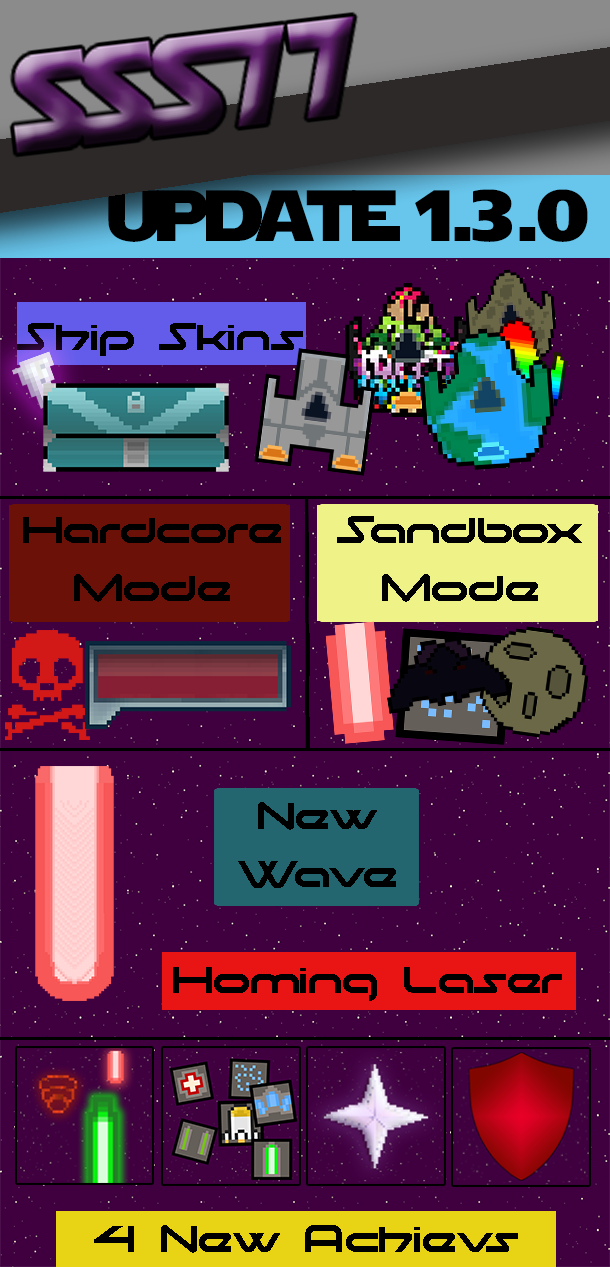
<style>
.page{position:relative;width:610px;height:1267px;background:#400040}
.page>*{position:absolute;margin:0}
.t1{font:72px "StarJedi";color:#000000}
.t2{font:48px "moonhouse";color:#000000}
</style>
<div class="page">
<p class="t1" style="left:108px;top:189px;width:480px;height:53px">update 1.3.0</p>
<p class="t2" style="left:17px;top:323px;width:286px;height:33px">Ship Skins</p>
<p class="t2" style="left:23px;top:517px;width:258px;height:85px;text-align:center">Hardcore<br>Mode</p>
<p class="t2" style="left:337px;top:516px;width:245px;height:86px;text-align:center">Sandbox<br>Mode</p>
<p class="t2" style="left:238px;top:802px;width:158px;height:86px;text-align:center">New<br>Wave</p>
<p class="t2" style="left:94px;top:1225px;width:424px;height:28px">4 New Achievs</p>
</div>
